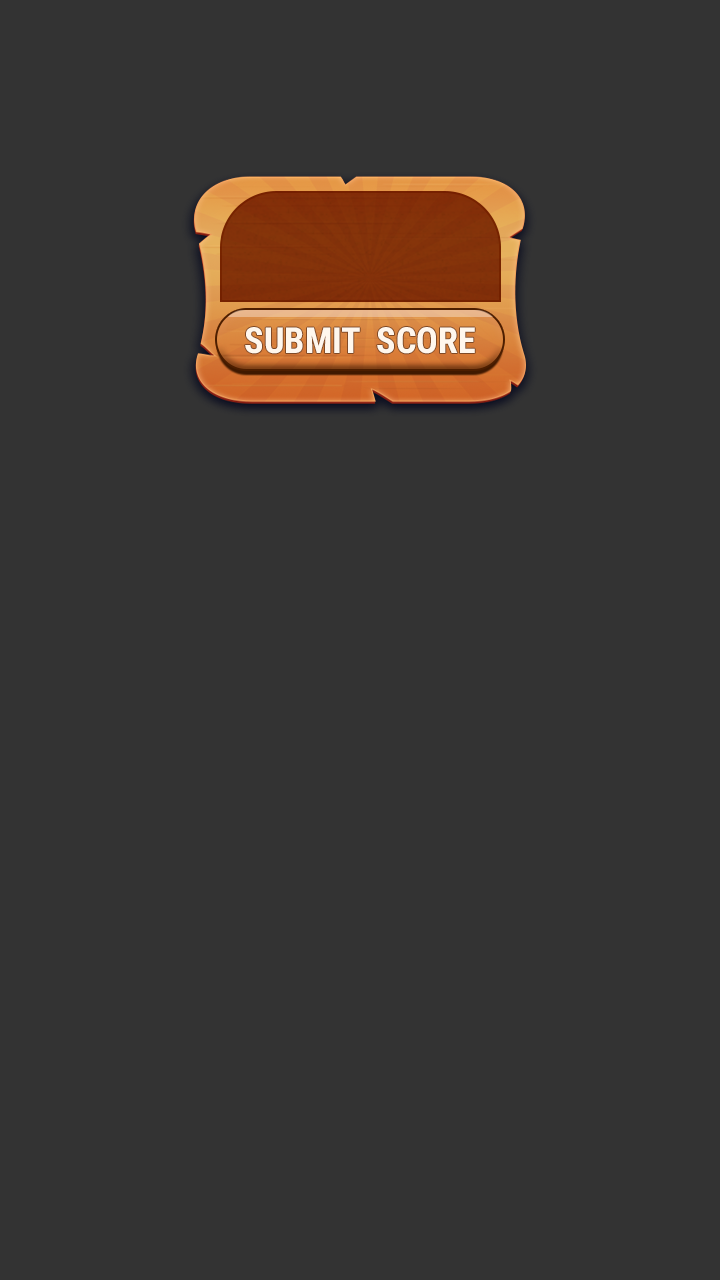
<style>
.page{position:relative;width:720px;height:1280px;background:#333333}
.page>*{position:absolute;margin:0}
.t1{font:36px "RobotoCondensed-Bold";color:#fff7ed}
</style>
<div class="page">
<p class="t1" style="left:245px;top:327px;width:230px;height:27px">SUBMIT  SCORE</p>
</div>
